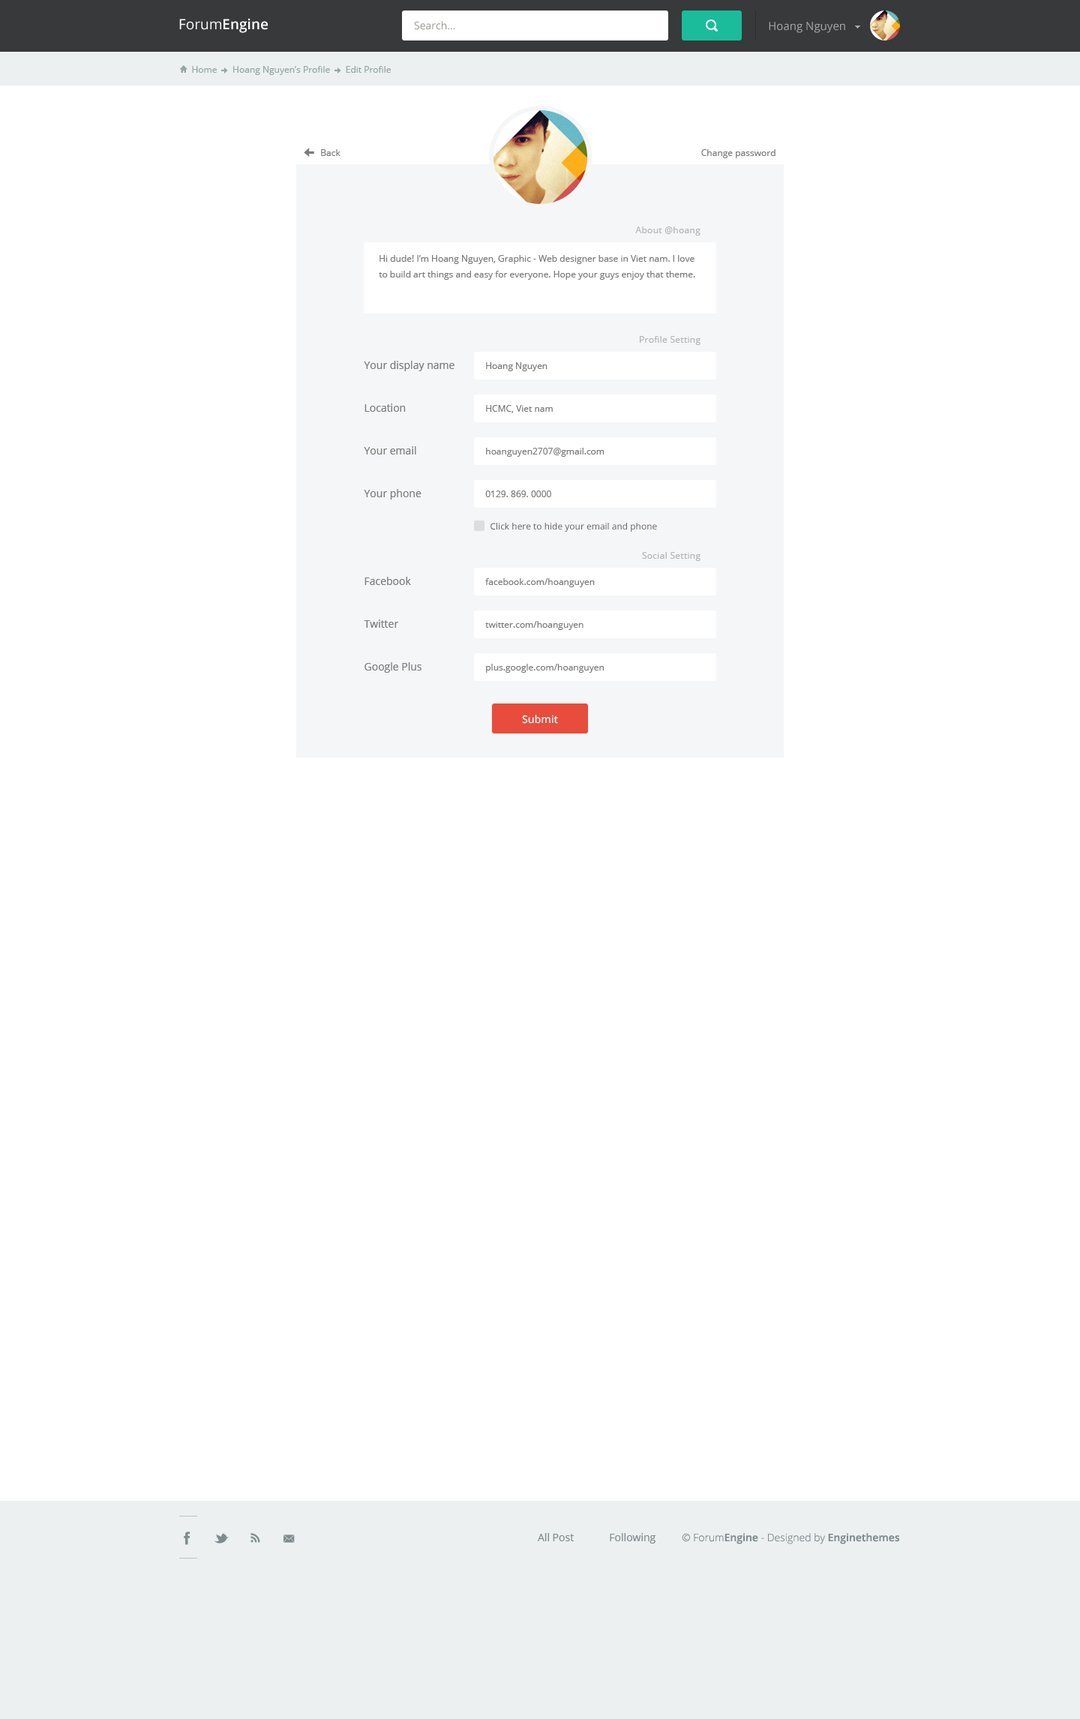
<style>
.page{position:relative;width:1080px;height:1719px;background:#ffffff}
.page>*{position:absolute;margin:0}
.t1{font:14.2px "OpenSans-Semibold";color:#ffffff}
.t2{font:14.2px "OpenSans";color:#ffffff}
.t3{font:10.5px "OpenSans";color:#9a9991}
.t4{font:11.2px "OpenSans";color:#a5a9ac}
.t5{font:9px "PictosRIP";color:#95a5a6}
.t6{font:9px "OpenSans";color:#95a5a6}
.t7{font:7.5px "PictosRIP";color:#95a5a6}
.t8{font:9px "OpenSans";color:#7b7b7b}
.t9{font:12px "PictosRIP";color:#7b7b7b}
.t10{font:9px "OpenSans";letter-spacing:0.025em;color:#b3b3b3}
.t11{font:9px/15.8px "OpenSans";color:#7b7b7b}
.t12{font:10.5px "OpenSans";color:#7b7b7b}
.t13{font:9px "OpenSans";color:#656268}
.t14{font:10.5px "OpenSans-Semibold";color:#ffffff}
.t15{font:10.5px "OpenSans";color:#7f8c8d}
.t16{font:10.5px "OpenSans-Light";color:#7f8c8d}
.t17{font:10.5px "OpenSans-Semibold";color:#7f8c8d}
</style>
<div class="page">
<p class="t1" style="left:179px;top:18px;width:89px;height:15px"><span class="t2">Forum</span>Engine</p>
<p class="t3" style="left:414px;top:21px;width:41px;height:9px">Search...</p>
<p class="t4" style="left:769px;top:22px;width:76px;height:11px">Hoang Nguyen</p>
<p class="t5" style="left:179px;top:65px;width:9px;height:8px">H</p>
<p class="t6" style="left:192px;top:66px;width:199px;height:9px"><span class="t5"> </span>Home <span class="t7">] </span>Hoang Nguyen’s Profile <span class="t7">] </span>Edit Profile</p>
<p class="t8" style="left:304px;top:148px;width:36px;height:9px"><span class="t9">[ </span>Back</p>
<p class="t8" style="left:701px;top:149px;width:75px;height:9px">Change password</p>
<p class="t10" style="left:635px;top:226px;width:65px;height:10px">About @hoang</p>
<p class="t11" style="left:379px;top:255px;width:316px;height:25px">Hi dude! I’m Hoang Nguyen, Graphic - Web designer base in Viet nam. I love to build art things and easy for everyone. Hope your guys enjoy that theme.</p>
<p class="t10" style="left:640px;top:336px;width:60px;height:9px">Profile Setting</p>
<p class="t12" style="left:364px;top:361px;width:90px;height:10px">Your display name</p>
<p class="t8" style="left:486px;top:362px;width:62px;height:9px">Hoang Nguyen</p>
<p class="t12" style="left:364px;top:404px;width:42px;height:8px">Location</p>
<p class="t8" style="left:486px;top:405px;width:67px;height:8px">HCMC, Viet nam</p>
<p class="t12" style="left:364px;top:446px;width:52px;height:8px">Your email</p>
<p class="t8" style="left:486px;top:448px;width:118px;height:9px">hoanguyen2707@gmail.com</p>
<p class="t12" style="left:364px;top:489px;width:58px;height:11px">Your phone</p>
<p class="t8" style="left:485px;top:490px;width:66px;height:7px">0129. 869. 0000</p>
<p class="t13" style="left:490px;top:523px;width:167px;height:9px">Click here to hide your email and phone</p>
<p class="t10" style="left:642px;top:552px;width:58px;height:9px">Social Setting</p>
<p class="t12" style="left:364px;top:577px;width:47px;height:8px">Facebook</p>
<p class="t8" style="left:485px;top:578px;width:110px;height:9px">facebook.com/hoanguyen</p>
<p class="t12" style="left:364px;top:620px;width:35px;height:8px">Twitter</p>
<p class="t8" style="left:485px;top:621px;width:99px;height:9px">twitter.com/hoanguyen</p>
<p class="t12" style="left:364px;top:662px;width:58px;height:11px">Google Plus</p>
<p class="t8" style="left:486px;top:664px;width:118px;height:9px">plus.google.com/hoanguyen</p>
<p class="t14" style="left:522px;top:715px;width:36px;height:9px">Submit</p>
<p class="t15" style="left:538px;top:1533px;width:118px;height:11px">All Post             Following</p>
<p class="t16" style="left:682px;top:1533px;width:218px;height:11px">© Forum<span class="t17">Engine</span> - Designed by <span class="t17">Enginethemes</span></p>
</div>
